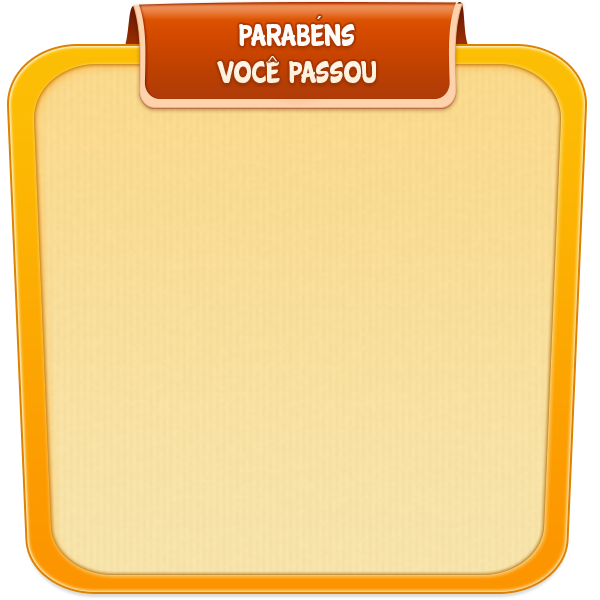
<style>
.page{position:relative;width:600px;height:600px}
.page>*{position:absolute;margin:0}
.t1{font:20.9px "MyriadPro-Regular";color:#ffffff;scale:0.94 1}
.t2{font:31.3px "Cartwheel";color:#fdf5e5;scale:0.94 1}
.t3{font:11.2px "MyriadPro-Regular";color:#ffffff;scale:1.71 1}
</style>
<div class="page">
<p class="t1" style="left:317px;top:16px;width:4px;height:3px">´</p>
<p class="t2" style="left:217px;top:24px;width:159px;height:59px;text-align:center">Parabens<br>Voce Passou</p>
<p class="t3" style="left:268px;top:56px;width:9px;height:6px">^</p>
</div>
